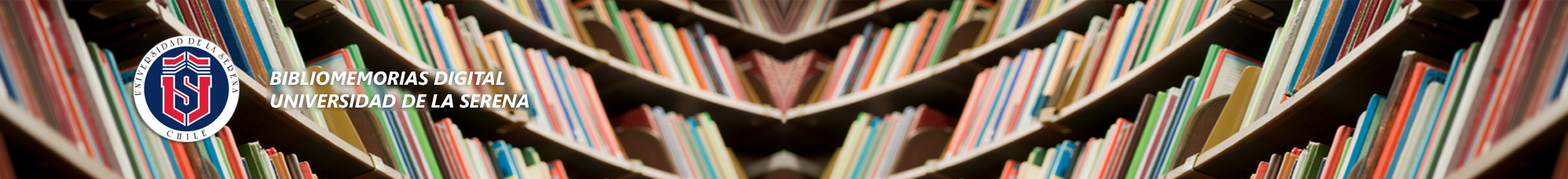
<style>
.page{position:relative;width:1568px;height:179px}
.page>*{position:absolute;margin:0}
.t1{font:18.9px "SegoeUI-BoldItalic";color:#ffffff}
</style>
<div class="page">
<p class="t1" style="left:269px;top:71px;width:260px;height:37px">BIBLIOMEMORIAS DIGITAL<br>UNIVERSIDAD DE LA SERENA</p>
</div>
